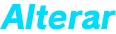
<style>
.page{position:relative;width:116px;height:34px;background:#ffffff}
.page>*{position:absolute;margin:0}
.t1{font:32px "RodinPro-EB";letter-spacing:-0.015em;color:#00dcfe;font-style:italic}
</style>
<div class="page">
<p class="t1" style="left:0px;top:4px;width:116px;height:26px">Alterar</p>
</div>
